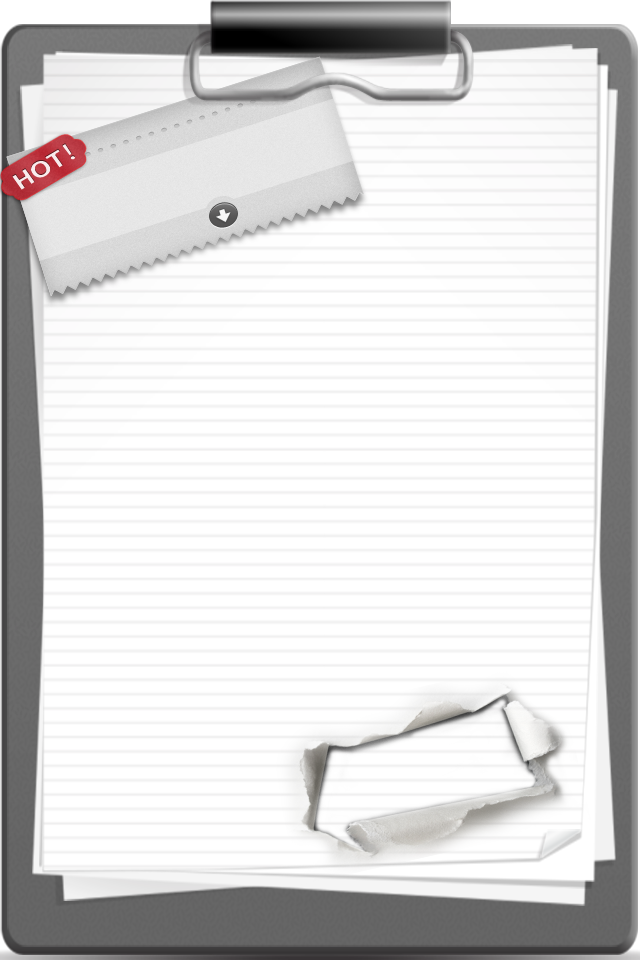
<style>
.page{position:relative;width:640px;height:960px;background:#ffffff}
.page>*{position:absolute;margin:0}
.t1{font:22.9px "Arial-BoldMT";color:#ffffff;scale:1.15 1}
.t2{font:22.9px "AdobeHeitiStd-Regular";color:#ffffff;scale:1.15 1}
</style>
<div class="page">
<p class="t1" style="left:12px;top:143px;width:63px;height:47px;rotate:-31deg;opacity:0.9">HOT<span class="t2">！</span></p>
</div>
